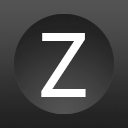
<style>
.page{position:relative;width:128px;height:128px}
.page>*{position:absolute;margin:0}
.t1{font:100px "Consolas";color:#ffffff}
</style>
<div class="page">
<p class="t1" style="left:41px;top:33px;width:45px;height:64px">Z</p>
</div>
